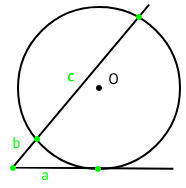
<style>
.page{position:relative;width:186px;height:188px;background:#ffffff}
.page>*{position:absolute;margin:0}
.t1{font:15.2px "PTSans-Regular";color:#00ff00}
.t2{font:15.2px "PTSans-Regular";color:#000000}
</style>
<div class="page">
<p class="t1" style="left:68px;top:73px;width:6px;height:9px">c</p>
<p class="t1" style="left:68px;top:73px;width:6px;height:9px">c</p>
<p class="t2" style="left:109px;top:73px;width:9px;height:12px">O</p>
<p class="t1" style="left:13px;top:137px;width:7px;height:12px">b</p>
<p class="t1" style="left:41px;top:172px;width:7px;height:9px">a</p>
</div>
